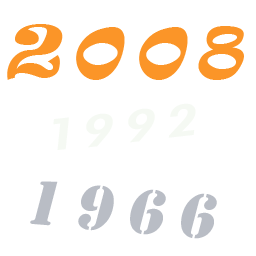
<style>
.page{position:relative;width:256px;height:256px;background:#ffffff}
.page>*{position:absolute;margin:0}
.t1{font:66px "Ravie";letter-spacing:0.2em;color:#fb9528;font-style:italic}
.t2{font:44px "Volkswagen-Headline";letter-spacing:0.2em;color:#f5f9f3;font-style:italic;scale:1.22 1}
.t3{font:66px "Stencil";letter-spacing:0.2em;color:#b9bdc5;font-style:italic}
</style>
<div class="page">
<p class="t1" style="left:7px;top:24px;width:237px;height:56px">2008</p>
<p class="t2" style="left:53px;top:103px;width:143px;height:47px;rotate:-6deg">1992</p>
<p class="t3" style="left:30px;top:181px;width:187px;height:58px;rotate:5deg">1966</p>
</div>
